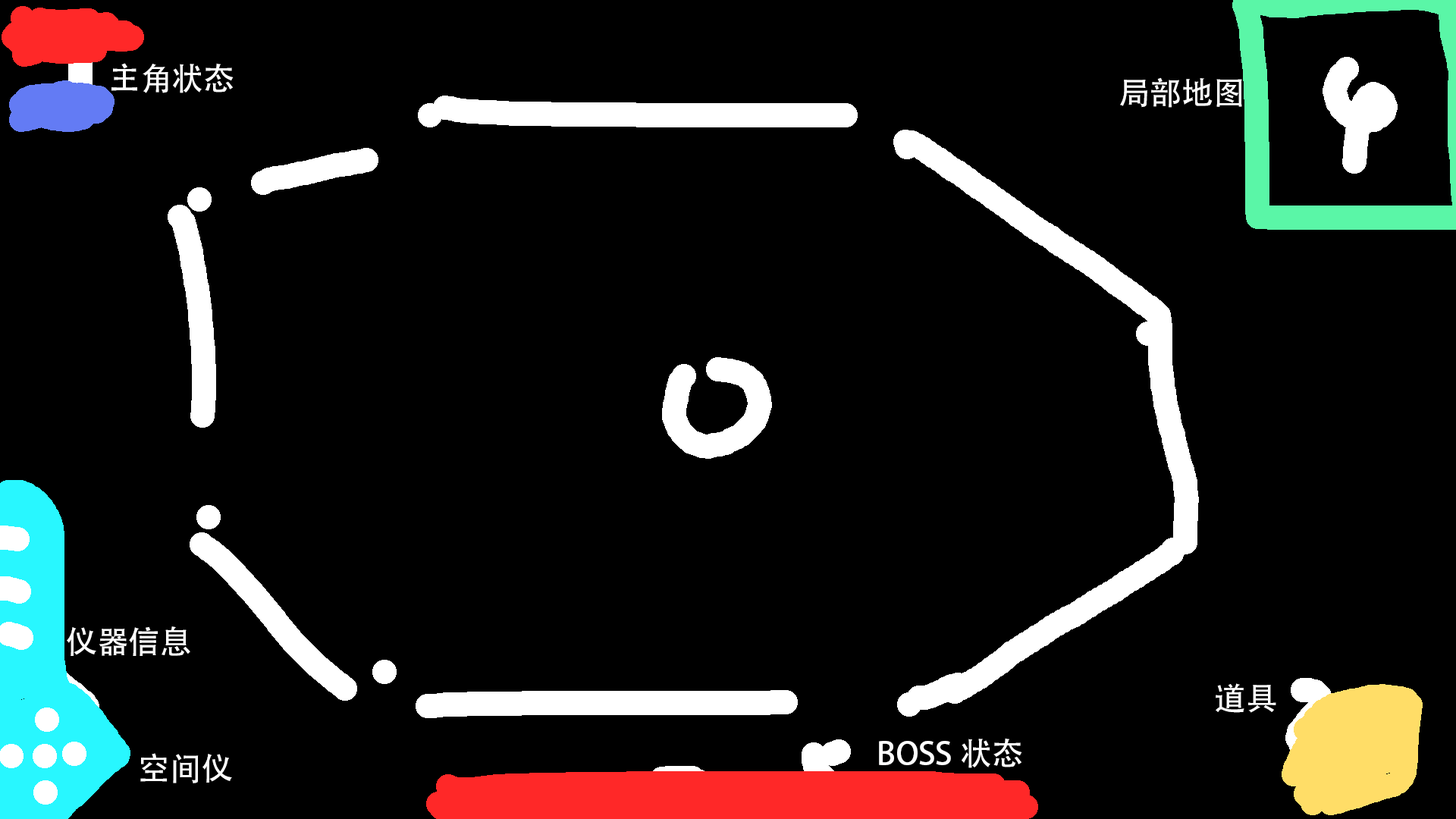
<style>
.page{position:relative;width:1456px;height:819px;background:#000000}
.page>*{position:absolute;margin:0}
.t1{font:31.6px "AdobeHeitiStd-Regular";color:#ffffff}
</style>
<div class="page">
<p class="t1" style="left:111px;top:63px;width:123px;height:30px">主角状态</p>
<p class="t1" style="left:1120px;top:77px;width:122px;height:31px">局部地图</p>
<p class="t1" style="left:67px;top:626px;width:123px;height:30px">仪器信息</p>
<p class="t1" style="left:1216px;top:683px;width:60px;height:30px">道具</p>
<p class="t1" style="left:879px;top:738px;width:143px;height:30px">BOSS状态</p>
<p class="t1" style="left:140px;top:753px;width:92px;height:30px">空间仪</p>
</div>
